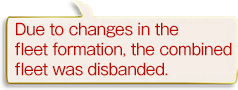
<style>
.page{position:relative;width:238px;height:90px;background:#f5ede6}
.page>*{position:absolute;margin:0}
.t1{font:16px/20px "GothicMB101Pro-Regular";letter-spacing:-0.04em;color:#bd0800}
</style>
<div class="page">
<p class="t1" style="left:15px;top:22px;width:217px;height:54px">Due to changes in the<br>fleet formation, the combined<br>fleet was disbanded.</p>
</div>
